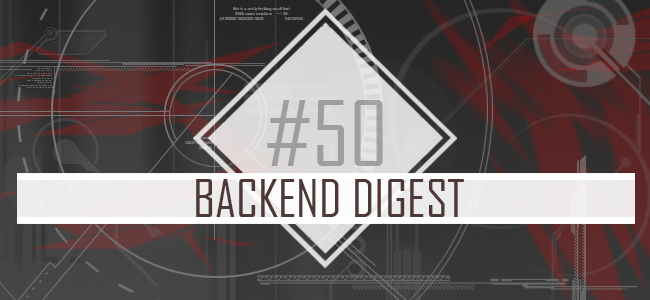
<style>
.page{position:relative;width:650px;height:300px}
.page>*{position:absolute;margin:0}
.t1{font:87.3px "AgencyFB-Reg";color:#9e9e9e;scale:1.03 1}
.t2{font:50.4px "AgencyFB-Reg";color:#4e3737;scale:1.03 1}
</style>
<div class="page">
<p class="t1" style="left:267px;top:100px;width:116px;height:66px">#50</p>
<p class="t2" style="left:196px;top:179px;width:268px;height:38px">BACKEND DIGEST</p>
</div>
